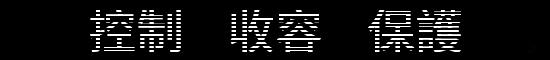
<style>
.page{position:relative;width:550px;height:60px;background:#000000}
.page>*{position:absolute;margin:0}
.t1{font:48px "SourceHanSansCN-Medium"}
</style>
<div class="page">
<p class="t1" style="left:90px;top:8px;width:372px;height:45px">控制    收容    保護</p>
</div>
